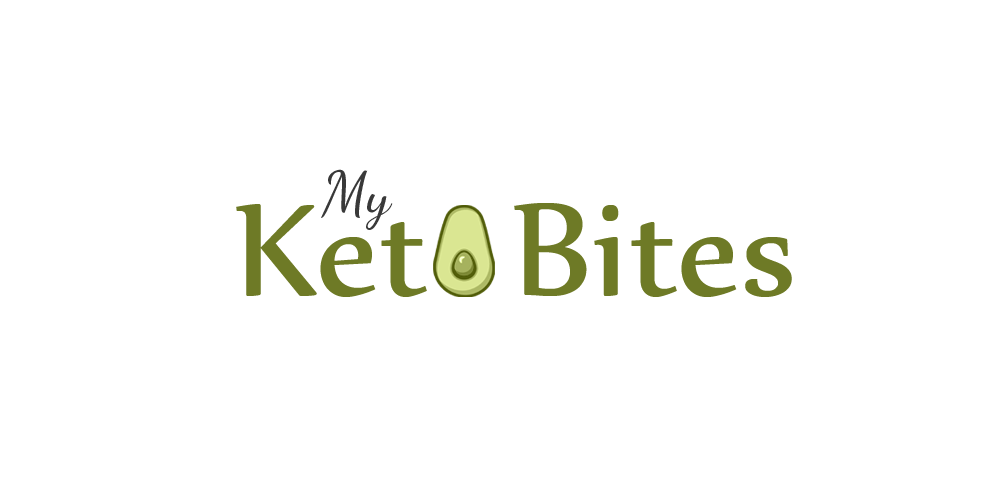
<style>
.page{position:relative;width:981px;height:485px;background:#ffffff}
.page>*{position:absolute;margin:0}
.t1{font:60px "DancingScriptOT";letter-spacing:0.014em;color:#393939}
.t2{font:158px "Nyala-Regular";letter-spacing:0.014em;color:#6e7a26}
</style>
<div class="page">
<p class="t1" style="left:321px;top:169px;width:72px;height:61px">My</p>
<p class="t2" style="left:236px;top:203px;width:556px;height:94px">Ket   Bites</p>
</div>
